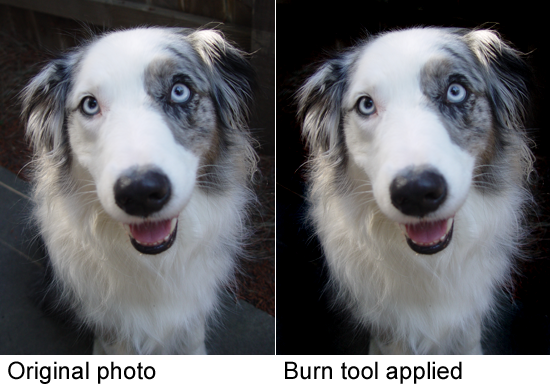
<style>
.page{position:relative;width:550px;height:390px}
.page>*{position:absolute;margin:0}
.t1{font:24px "ArialMT";color:#000000}
</style>
<div class="page">
<p class="t1" style="left:8px;top:361px;width:148px;height:23px">Original photo</p>
<p class="t1" style="left:285px;top:361px;width:177px;height:23px">Burn tool applied</p>
</div>
